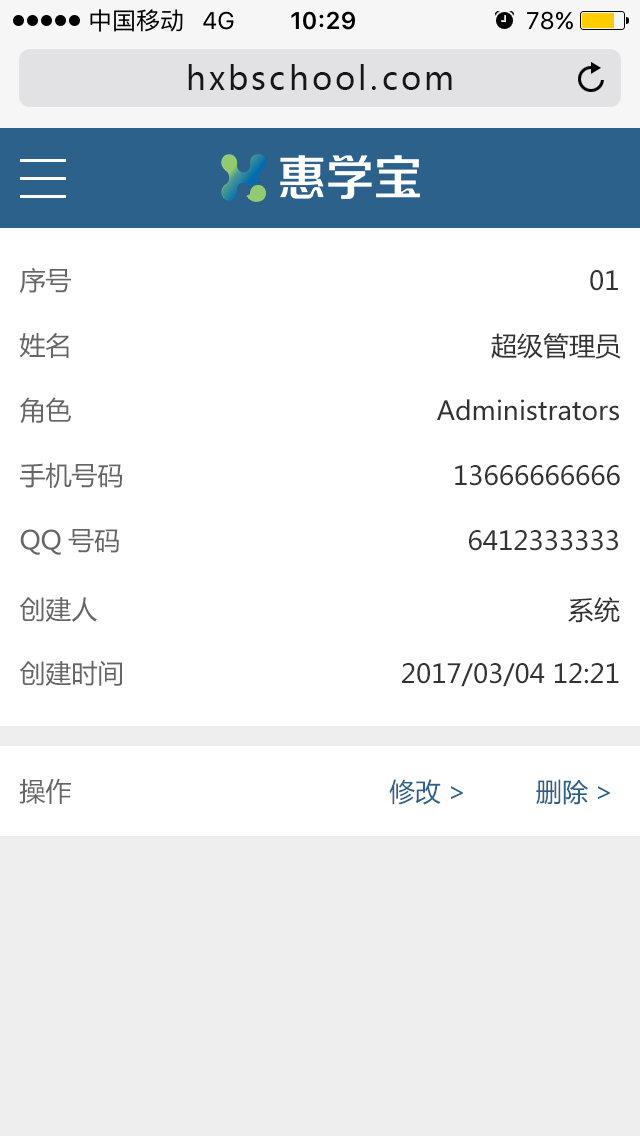
<style>
.page{position:relative;width:640px;height:1136px;background:#ffffff}
.page>*{position:absolute;margin:0}
.t1{font:32px "MicrosoftYaHei";letter-spacing:0.1em;color:#171717}
.t2{font:26px "MicrosoftYaHei";color:#666666}
.t3{font:26px "MicrosoftYaHei";color:#333333}
.t4{font:26px "MicrosoftYaHei";color:#2c618b}
</style>
<div class="page">
<p class="t1" style="left:188px;top:64px;width:264px;height:26px">hxbschool.com</p>
<p class="t2" style="left:19px;top:267px;width:52px;height:26px">序号</p>
<p class="t3" style="left:590px;top:270px;width:28px;height:21px">01</p>
<p class="t2" style="left:19px;top:332px;width:50px;height:26px">姓名</p>
<p class="t3" style="left:491px;top:333px;width:130px;height:26px">超级管理员</p>
<p class="t2" style="left:20px;top:397px;width:51px;height:27px">角色</p>
<p class="t3" style="left:437px;top:399px;width:182px;height:22px">Administrators</p>
<p class="t2" style="left:20px;top:462px;width:103px;height:27px">手机号码</p>
<p class="t3" style="left:455px;top:465px;width:165px;height:21px">13666666666</p>
<p class="t2" style="left:20px;top:529px;width:99px;height:26px">QQ号码</p>
<p class="t3" style="left:469px;top:530px;width:149px;height:21px">6412333333</p>
<p class="t2" style="left:20px;top:597px;width:77px;height:25px">创建人</p>
<p class="t3" style="left:568px;top:597px;width:52px;height:26px">系统</p>
<p class="t2" style="left:20px;top:660px;width:102px;height:26px">创建时间</p>
<p class="t3" style="left:402px;top:663px;width:217px;height:24px">2017/03/04 12:21</p>
<p class="t2" style="left:19px;top:778px;width:52px;height:26px">操作</p>
<p class="t4" style="left:389px;top:779px;width:221px;height:26px">修改&gt;         删除&gt;</p>
</div>
